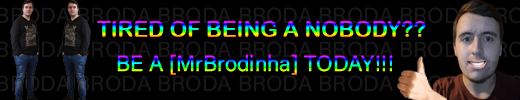
<style>
.page{position:relative;width:520px;height:100px;background:#000000}
.page>*{position:absolute;margin:0}
.t1{font:22px "ArialRoundedMTBold"}
.t2{font:22px "AcuminConcept-Regular"}
</style>
<div class="page">
<p class="t1" style="left:97px;top:21px;width:329px;height:16px">TIRED OF BEING A NOBODY??</p>
<p class="t2" style="left:117px;top:54px;width:276px;height:21px">BE A [MrBrodinha] TODAY!!!</p>
</div>
